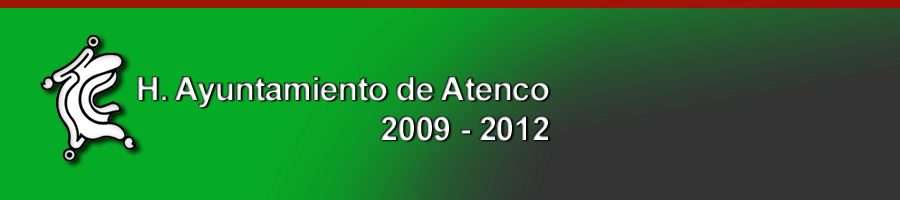
<style>
.page{position:relative;width:900px;height:200px;background:#05ab24}
.page>*{position:absolute;margin:0}
.t1{font:33.6px "Arial-BoldMT";letter-spacing:-0.025em}
</style>
<div class="page">
<p class="t1" style="left:137px;top:76px;width:412px;height:65px;text-align:right">H. Ayuntamiento de Atenco<br>2009 - 2012</p>
</div>
